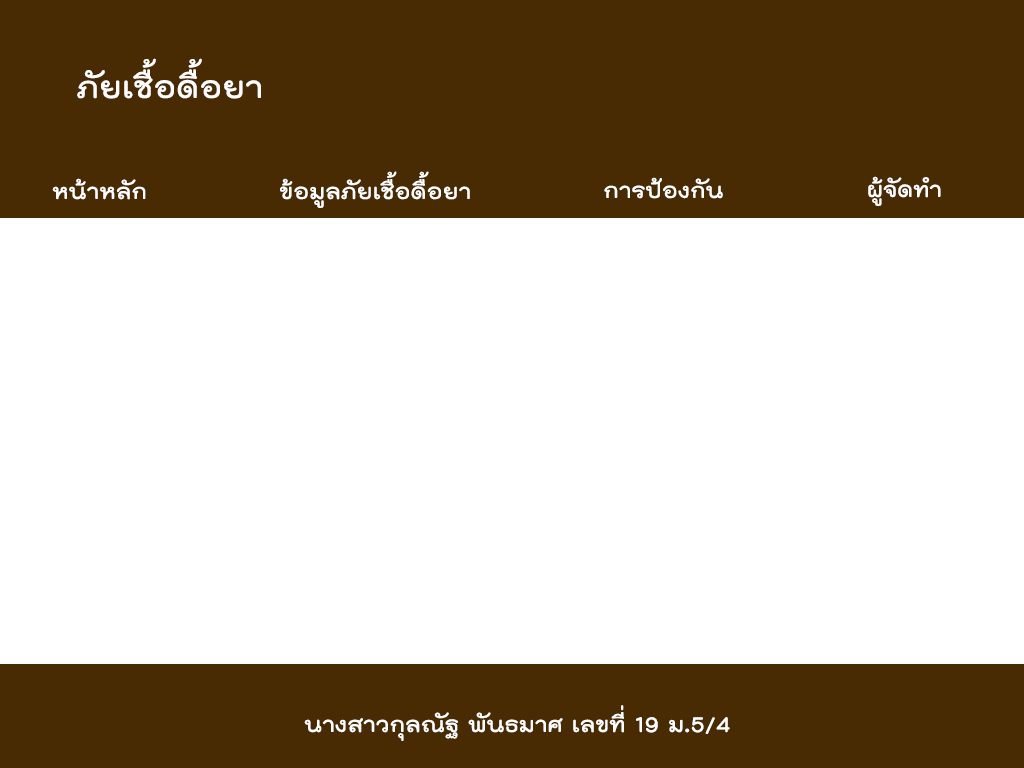
<style>
.page{position:relative;width:1024px;height:768px;background:#ffffff}
.page>*{position:absolute;margin:0}
.t1{font:43px "THKodchasal-Bold";color:#fefefe}
.t2{font:30px "THKodchasal-Bold";color:#fefefe}
</style>
<div class="page">
<p class="t1" style="left:77px;top:58px;width:184px;height:41px">ภัยเชื้อดื้อยา</p>
<p class="t2" style="left:280px;top:171px;width:190px;height:37px">ข้อมูลภัยเชื้อดื้อยา</p>
<p class="t2" style="left:52px;top:178px;width:94px;height:22px">หน้าหลัก</p>
<p class="t2" style="left:604px;top:177px;width:119px;height:22px">การป้องกัน</p>
<p class="t2" style="left:868px;top:176px;width:73px;height:30px">ผู้จัดทำ</p>
<p class="t2" style="left:304px;top:705px;width:426px;height:36px">นางสาวกุลณัฐ พันธมาศ เลขที่ 19 ม.5/4</p>
</div>
